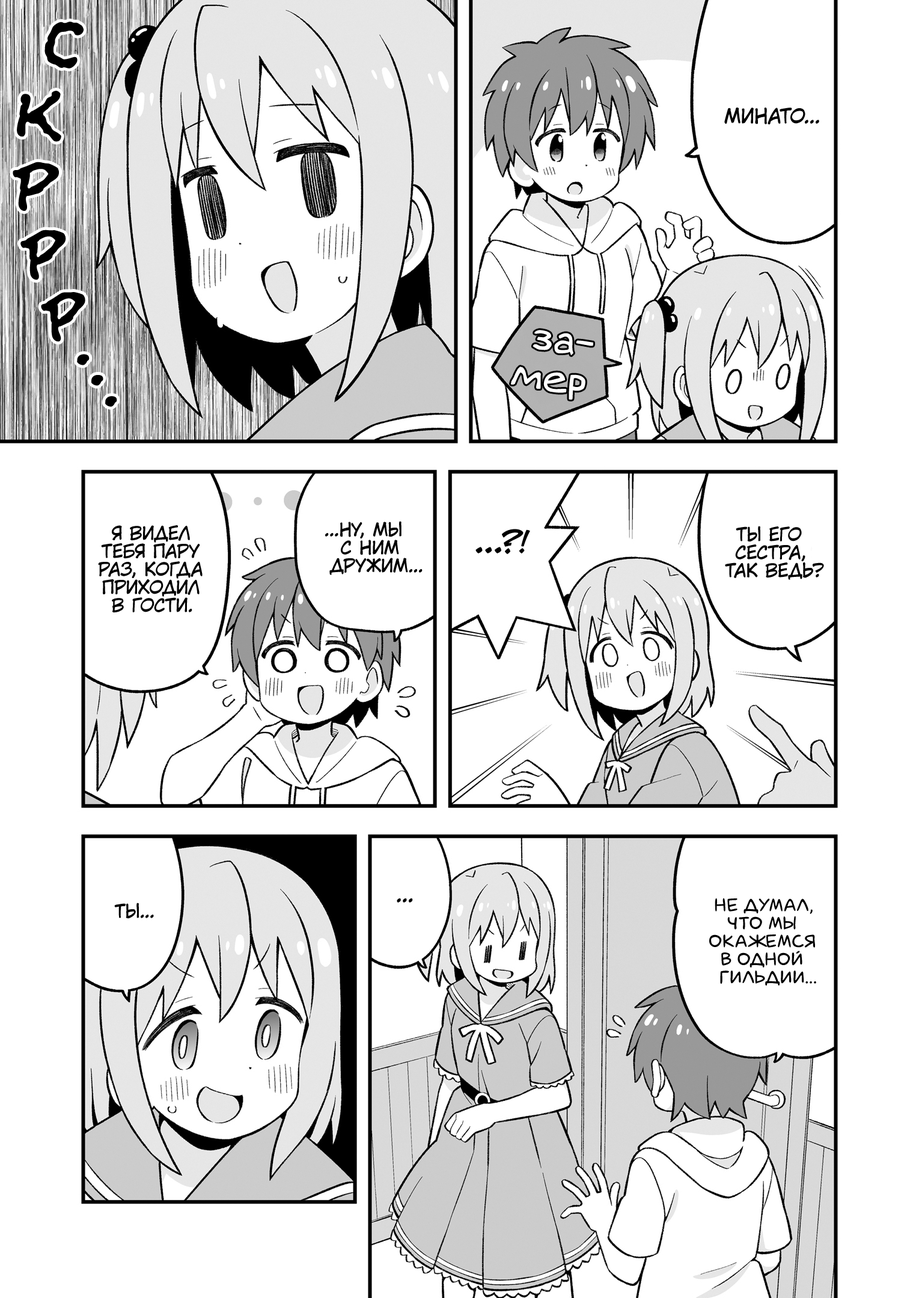
<style>
.page{position:relative;width:919px;height:1298px;background:#ffffff}
.page>*{position:absolute;margin:0}
.t1{font:76.9px "el_CCEvilSchemes";color:#000000}
.t2{font:75.7px "el_CCEvilSchemes";color:#000000}
.t3{font:19.8px "KuraiVoice2";color:#000000;text-transform:uppercase}
.t4{font:74.5px "el_CCEvilSchemes";color:#000000}
.t5{font:73.3px "el_CCEvilSchemes";color:#000000}
.t6{font:72.1px "el_CCEvilSchemes";color:#000000}
.t7{font:39.7px "v_Augie";color:#ffffff;font-weight:bold}
.t8{font:70.9px "el_CCEvilSchemes";color:#000000}
.t9{font:69.7px "el_CCEvilSchemes";color:#000000}
.t10{font:68.5px "el_CCEvilSchemes";color:#000000}
.t11{font:18px "KuraiVoice2";color:#000000;text-transform:uppercase}
.t12{font:28.8px "v_CCJeffCampbell";color:#000000;text-transform:uppercase}
.t13{font:21.6px "KuraiVoice2";color:#000000;text-transform:uppercase}
.t14{font:18px "laCartoonerie";color:#000000;text-transform:uppercase}
</style>
<div class="page">
<p class="t1" style="left:44px;top:22px;width:40px;height:47px;rotate:5deg">с</p>
<p class="t2" style="left:17px;top:91px;width:44px;height:51px;rotate:5deg">к</p>
<p class="t3" style="left:724px;top:108px;width:95px;height:16px">Минато...</p>
<p class="t4" style="left:13px;top:162px;width:46px;height:49px">р</p>
<p class="t5" style="left:20px;top:230px;width:46px;height:50px;rotate:-8deg">р</p>
<p class="t6" style="left:41px;top:292px;width:44px;height:50px;rotate:-10deg">р</p>
<p class="t7" style="left:511px;top:330px;width:82px;height:70px;text-align:center;rotate:9deg">за-<br>мер</p>
<p class="t8" style="left:77px;top:354px;width:13px;height:11px">.</p>
<p class="t9" style="left:91px;top:375px;width:12px;height:11px">.</p>
<p class="t10" style="left:105px;top:396px;width:12px;height:11px">.</p>
<p class="t11" style="left:325px;top:521px;width:97px;height:54px;text-align:center">...Ну, мы<br>с ним<br>дружим...</p>
<p class="t11" style="left:98px;top:525px;width:104px;height:88px;text-align:center">Я видел<br>тебя пару<br>раз, когда<br>приходил<br>в гости.</p>
<p class="t12" style="left:475px;top:529px;width:55px;height:25px">...?!</p>
<p class="t11" style="left:725px;top:526px;width:99px;height:54px;text-align:center">Ты его<br>сестра,<br>так ведь?</p>
<p class="t11" style="left:114px;top:903px;width:40px;height:16px">Ты...</p>
<p class="t13" style="left:397px;top:898px;width:16px;height:5px">...</p>
<p class="t14" style="left:709px;top:898px;width:107px;height:87px;text-align:center">Не думал,<br>что мы<br>окажемся<br>в одной<br>гильдии...</p>
</div>
